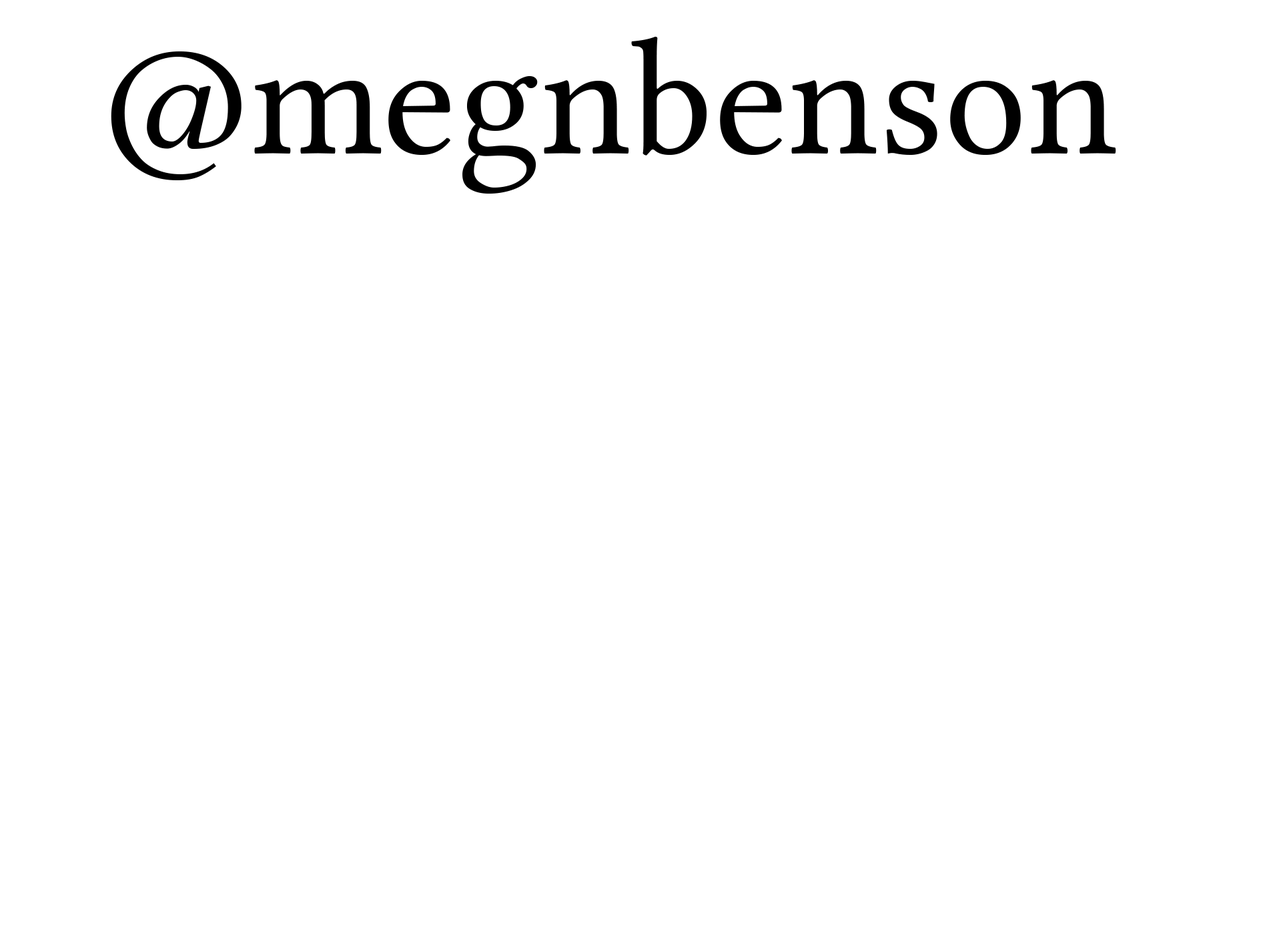
<style>
.page{position:relative;width:1261px;height:946px;background:#ffffff}
.page>*{position:absolute;margin:0}
.t1{font:166.8px "LinLibertine";color:#000000}
</style>
<div class="page">
<p class="t1" style="left:111px;top:37px;width:1005px;height:157px">@megnbenson</p>
</div>
